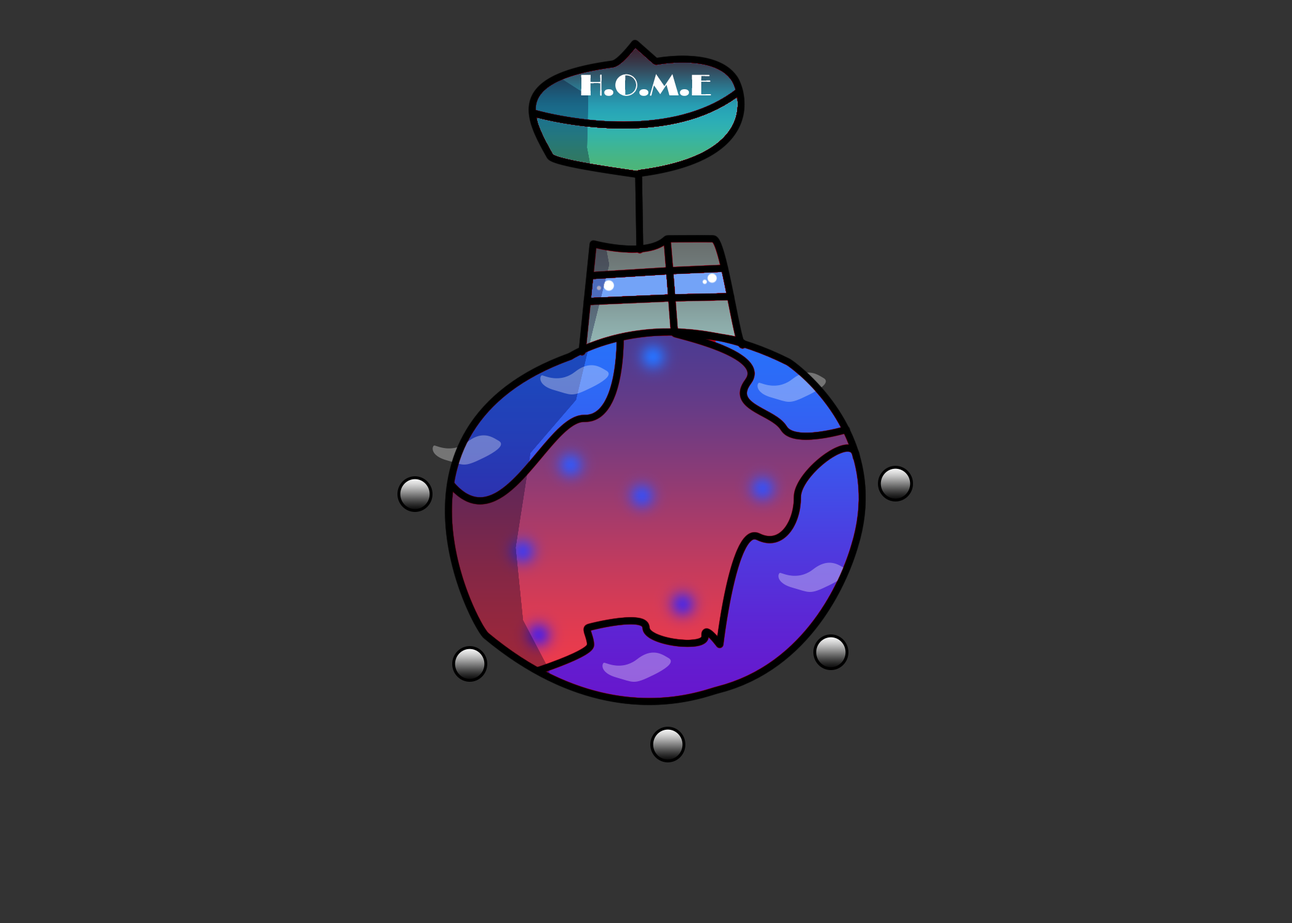
<style>
.page{position:relative;width:1292px;height:923px;background:#333333}
.page>*{position:absolute;margin:0}
.t1{font:30.8px "Broadway";color:#fefefe}
</style>
<div class="page">
<p class="t1" style="left:581px;top:74px;width:130px;height:22px">H.O.M.E</p>
</div>
